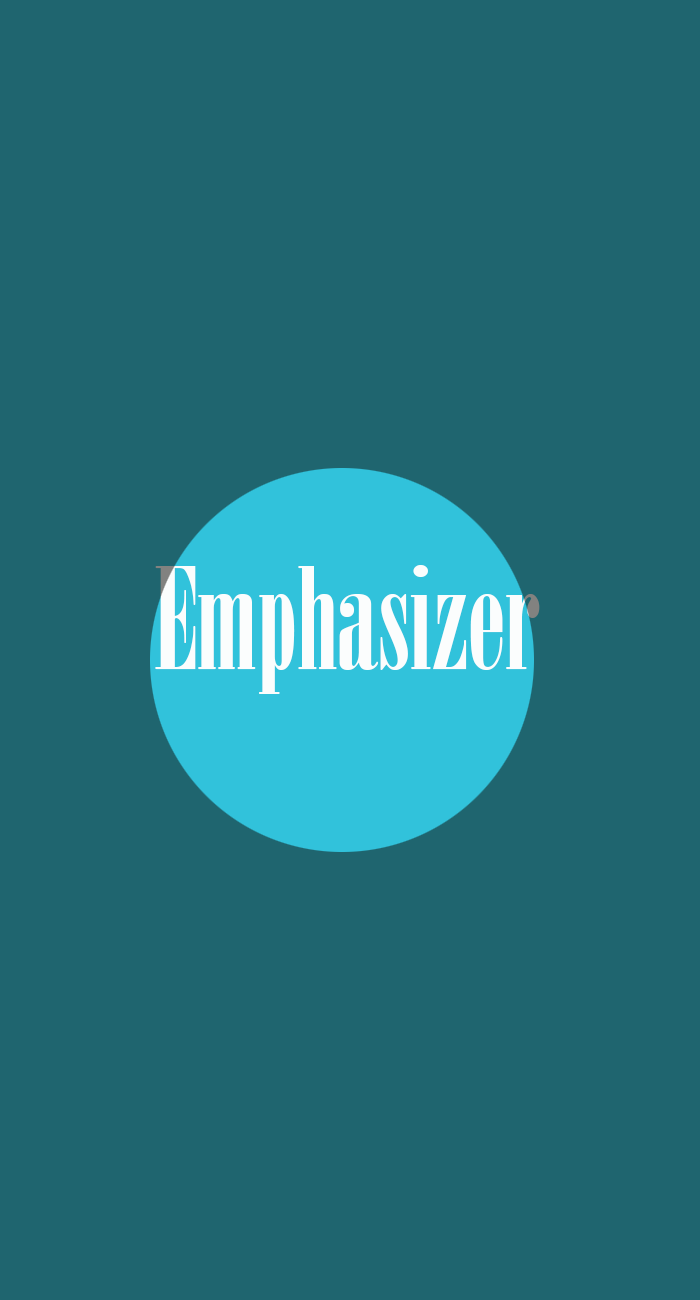
<style>
.page{position:relative;width:700px;height:1300px;background:#1f656f}
.page>*{position:absolute;margin:0}
.t1{font:140px "Onyx";color:#fbfdfd}
</style>
<div class="page">
<p class="t1" style="left:155px;top:565px;width:385px;height:129px">Emphasizer</p>
</div>
